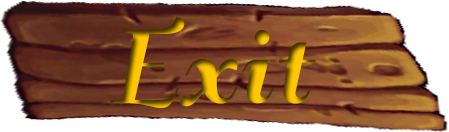
<style>
.page{position:relative;width:449px;height:132px}
.page>*{position:absolute;margin:0}
.t1{font:90px "QumpellkaNo12";font-weight:bold}
</style>
<div class="page">
<p class="t1" style="left:110px;top:17px;width:206px;height:91px">Exit</p>
</div>
